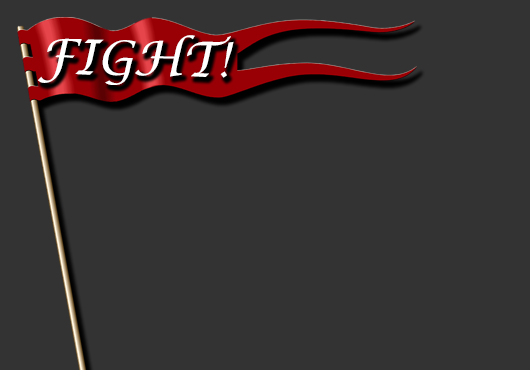
<style>
.page{position:relative;width:530px;height:370px;background:#333333}
.page>*{position:absolute;margin:0}
.t1{font:48px "LucidaCalligraphy-Italic";color:#ffffff}
</style>
<div class="page">
<p class="t1" style="left:38px;top:35px;width:196px;height:50px;rotate:1deg">FIGHT!</p>
</div>
